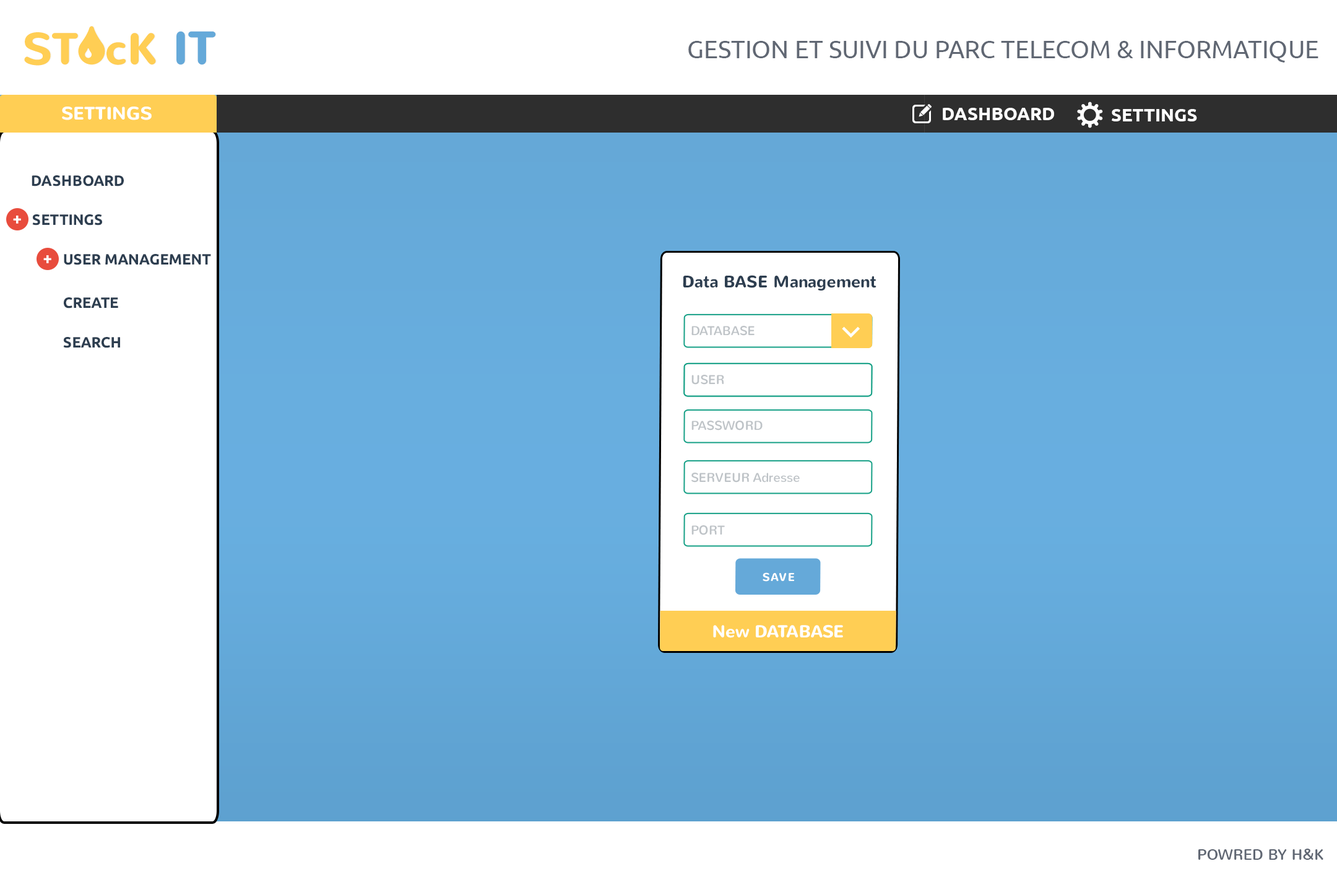
<style>
.page{position:relative;width:1337px;height:892px;background:#ffffff}
.page>*{position:absolute;margin:0}
.t1{font:24.8px "Ubuntu";color:#606773;text-transform:uppercase}
.t2{font:18px "Nunito-Bold";color:#ffffff}
.t3{font:18px "Ubuntu-Bold";color:#ffffff}
.t4{font:14.9px "Ubuntu-Bold";color:#2d3e50}
.t5{font:16px "Ubuntu-Bold";color:#ffffff}
.t6{font:16.6px "Nunito-Bold";color:#2d3e50}
.t7{font:12.9px "Nunito-Regular";color:#bec3c7}
.t8{font:11.3px "Nunito-Bold";letter-spacing:0.1em;color:#ffffff}
.t9{font:17.2px "Nunito-Bold";color:#ffffff}
.t10{font:14.9px "Nunito-Regular";color:#606773;text-transform:uppercase}
</style>
<div class="page">
<p class="t1" style="left:689px;top:41px;width:630px;height:22px">GESTION ET SUIVI DU PARC TELECOM &amp; INFORMATIQUE</p>
<p class="t2" style="left:62px;top:106px;width:90px;height:14px">SETTINGS</p>
<p class="t3" style="left:943px;top:108px;width:111px;height:12px">DASHBOARD</p>
<p class="t3" style="left:1112px;top:109px;width:85px;height:12px">SETTINGS</p>
<p class="t4" style="left:32px;top:175px;width:92px;height:11px">DASHBOARD</p>
<p class="t5" style="left:13px;top:215px;width:8px;height:9px">+</p>
<p class="t4" style="left:32px;top:214px;width:70px;height:11px">SETTINGS</p>
<p class="t5" style="left:43px;top:255px;width:8px;height:8px">+</p>
<p class="t4" style="left:64px;top:254px;width:147px;height:11px">USER MANAGEMENT</p>
<p class="t6" style="left:683px;top:275px;width:194px;height:15px">Data BASE Management</p>
<p class="t4" style="left:64px;top:297px;width:54px;height:11px">CREATE</p>
<p class="t7" style="left:692px;top:326px;width:63px;height:10px">DATABASE</p>
<p class="t4" style="left:63px;top:337px;width:57px;height:11px">SEARCH</p>
<p class="t7" style="left:692px;top:375px;width:32px;height:10px">USER</p>
<p class="t7" style="left:692px;top:420px;width:71px;height:10px">PASSWORD</p>
<p class="t7" style="left:692px;top:472px;width:108px;height:10px">SERVEUR Adresse</p>
<p class="t7" style="left:692px;top:525px;width:33px;height:10px">PORT</p>
<p class="t8" style="left:763px;top:572px;width:31px;height:9px">SAVE</p>
<p class="t9" style="left:713px;top:624px;width:130px;height:14px">New DATABASE</p>
<p class="t10" style="left:1199px;top:848px;width:125px;height:11px">PoWRED BY H&amp;K</p>
</div>
